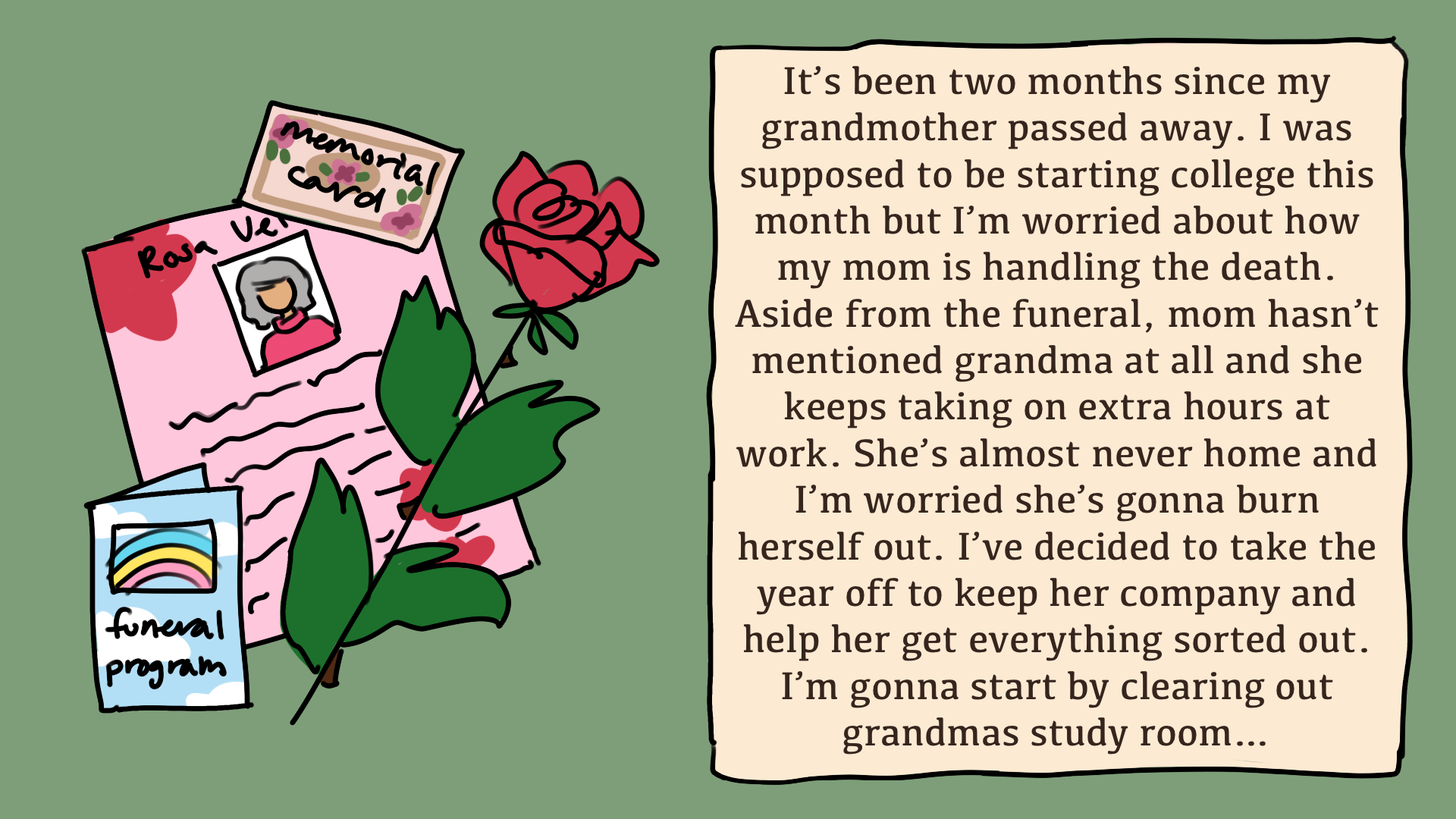
<style>
.page{position:relative;width:1456px;height:819px;background:#7e9e7a}
.page>*{position:absolute;margin:0}
.t1{font:40.2px "Kefa-Regular";color:#35251d}
</style>
<div class="page">
<p class="t1" style="left:0px;top:0px;width:1456px;height:819px;text-align:center">It’s been two months since my grandmother passed away. I was supposed to be starting college this month but I’m worried about how my mom is handling the death. Aside from the funeral, mom hasn’t mentioned grandma at all and she keeps taking on extra hours at work. She’s almost never home and I’m worried she’s gonna burn herself out. I’ve decided to take the year off to keep her company and help her get everything sorted out. I’m gonna start by clearing out grandmas study room…</p>
</div>
